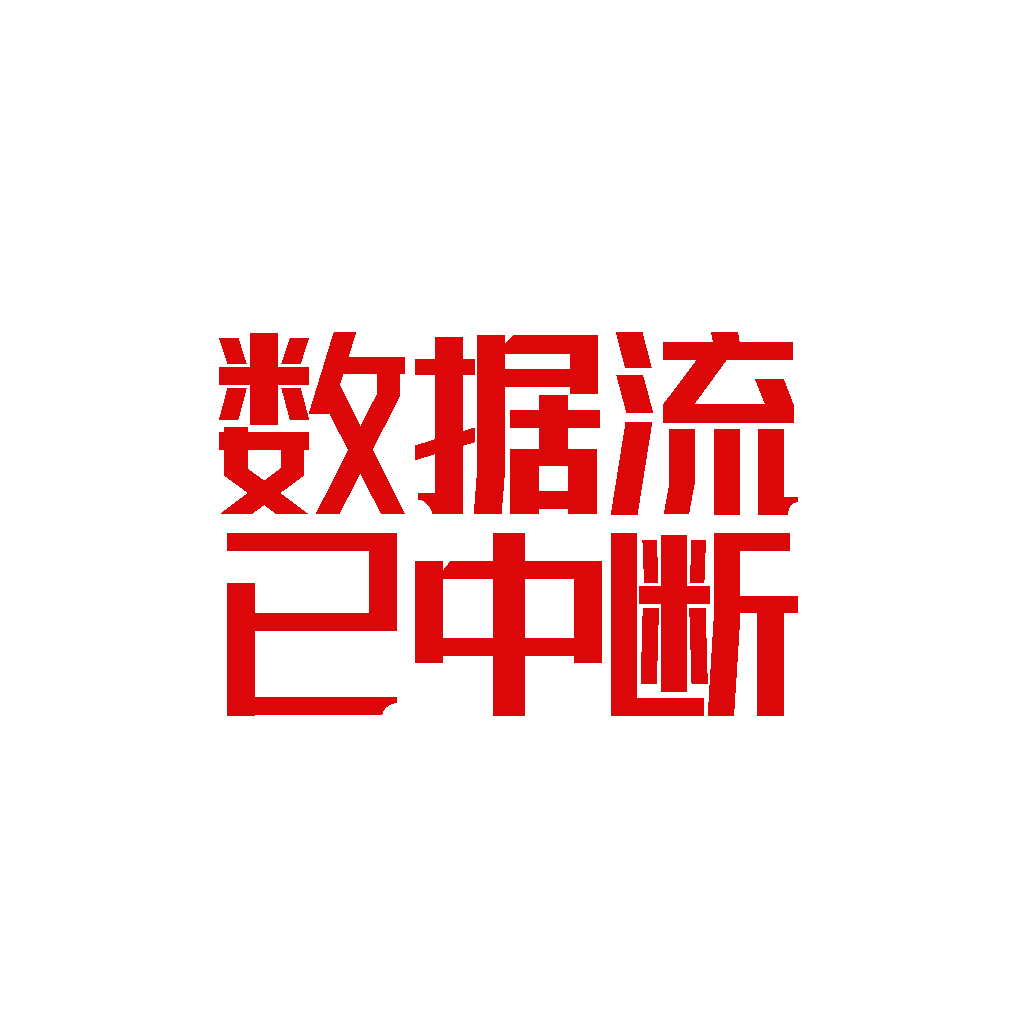
<style>
.page{position:relative;width:1024px;height:1024px;background:#ffffff}
.page>*{position:absolute;margin:0}
.t1{font:183.1px/200.6px "lianmengqiyilushuaizhengruiheiti-Regular";color:#db0708}
</style>
<div class="page">
<p class="t1" style="left:219px;top:332px;width:579px;height:384px;text-align:center">数据流<br>已中断</p>
</div>
